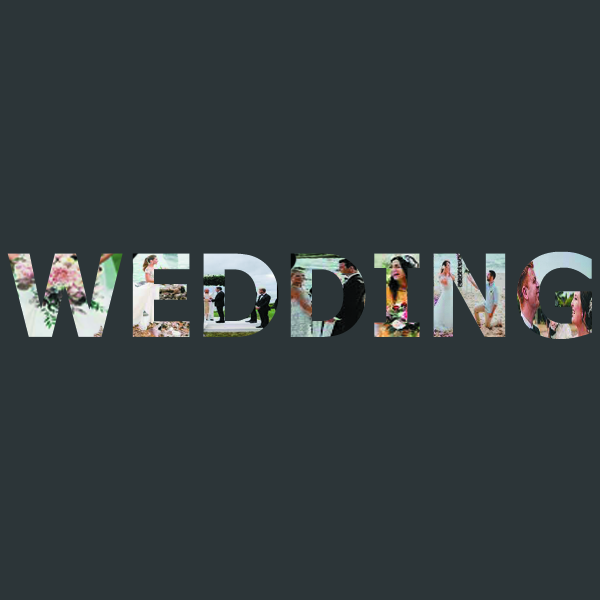
<style>
.page{position:relative;width:600px;height:600px;background:#2c3538}
.page>*{position:absolute;margin:0}
.t1{font:115px "Tahoma-Bold"}
</style>
<div class="page">
<p class="t1" style="left:7px;top:251px;width:585px;height:88px">WEDDING</p>
</div>
